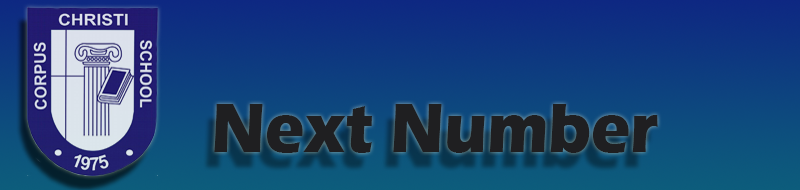
<style>
.page{position:relative;width:800px;height:190px}
.page>*{position:absolute;margin:0}
.t1{font:72px "ErasITC-Bold";color:#1f1f21;scale:0.91 1}
</style>
<div class="page">
<p class="t1" style="left:214px;top:104px;width:444px;height:49px">Next Number</p>
</div>
